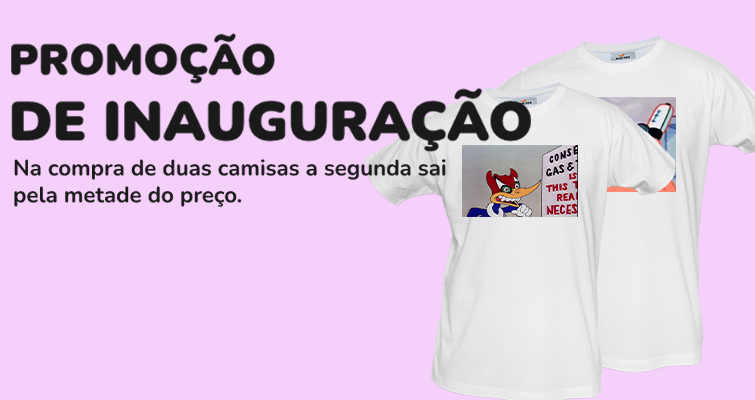
<style>
.page{position:relative;width:755px;height:400px;background:#f5d0fb}
.page>*{position:absolute;margin:0}
.t1{font:54.9px "NunitoHeavy-Regular";color:#1a1a1a}
.t2{font:43.2px "NunitoHeavy-Regular";color:#1a1a1a}
.t3{font:22.3px "Nunito-Bold";color:#1a1a1a}
</style>
<div class="page">
<p class="t1" style="left:11px;top:33px;width:520px;height:119px"><span class="t2">PROMOÇÃO <br></span>DE INAUGURAÇÃO</p>
<p class="t3" style="left:14px;top:159px;width:432px;height:48px">Na compra de duas camisas a segunda sai <br>pela metade do preço.</p>
</div>
